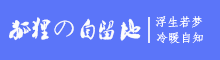
<style>
.page{position:relative;width:220px;height:60px;background:#5b75f9}
.page>*{position:absolute;margin:0}
.t1{font:22px "Ò¶¸ùÓÑÐÐÊé·±";color:#fcfcfc}
.t2{font:12px "·ÂËÎ";color:#ffffff}
</style>
<div class="page">
<p class="t1" style="left:9px;top:17px;width:132px;height:24px">狐狸の自留地</p>
<p class="t2" style="left:155px;top:16px;width:48px;height:12px">浮生若梦</p>
<p class="t2" style="left:156px;top:32px;width:47px;height:12px">冷暖自知</p>
</div>
